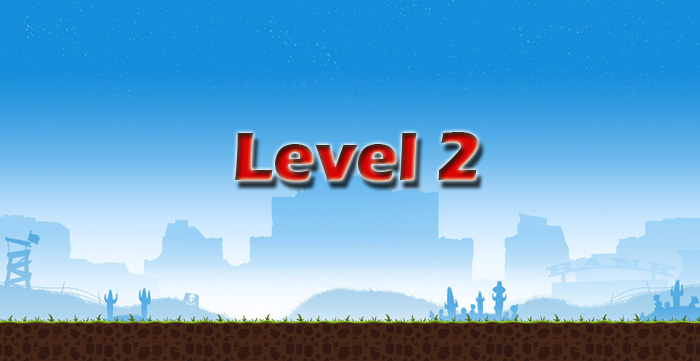
<style>
.page{position:relative;width:700px;height:361px}
.page>*{position:absolute;margin:0}
.t1{font:70px "ErasITC-Bold"}
</style>
<div class="page">
<p class="t1" style="left:235px;top:132px;width:243px;height:49px">Level 2</p>
</div>
